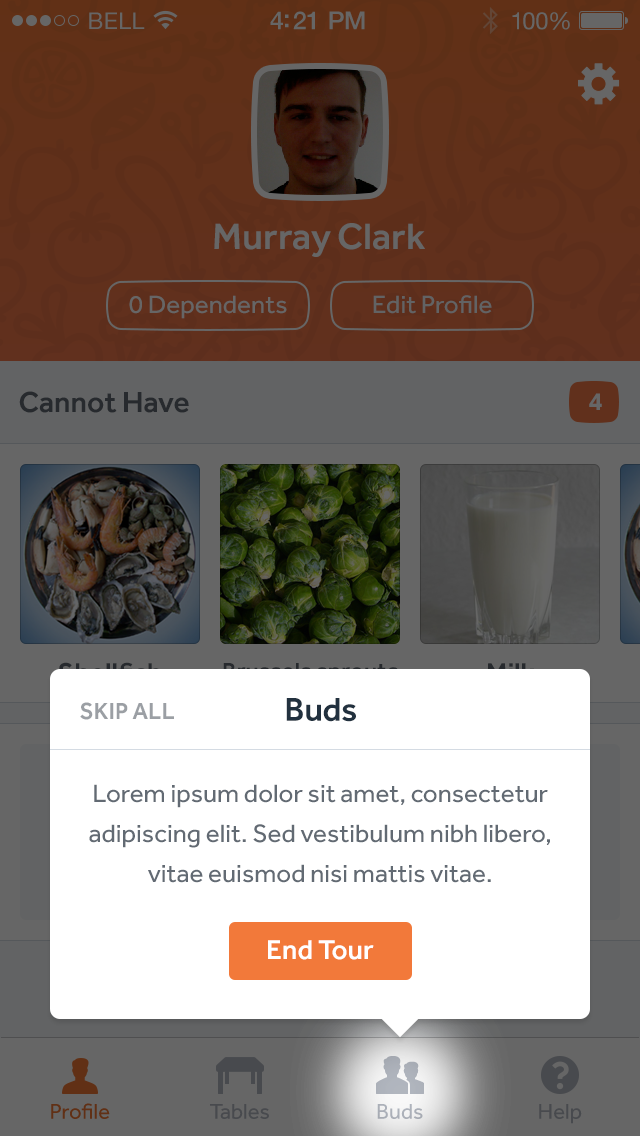
<style>
.page{position:relative;width:640px;height:1136px;background:#ffffff}
.page>*{position:absolute;margin:0}
.t1{font:23px "HelveticaNeue";letter-spacing:0.02em;color:#666666}
.t2{font:25px "HelveticaNeue-Medium";letter-spacing:-0.02em;color:#666666}
.t3{font:24px "HelveticaNeue";letter-spacing:-0.02em;color:#666666}
.t4{font:38px "Effra-Medium";color:#666666}
.t5{font:26px "Effra-Regular";color:#666666}
.t6{font:26px "Effra-Regular";color:#626364}
.t7{font:30px "Effra-Medium";color:#272a2e}
.t8{font:26px "Effra-Bold";color:#666666}
.t9{font:24px "Effra-Medium";color:#9b9fa4;text-transform:uppercase}
.t10{font:34px "Effra-Medium";letter-spacing:-0.01em;color:#22313f}
.t11{font:26px/40px "Effra-Regular";color:#626a73}
.t12{font:28px "Effra-Medium";color:#ffffff}
.t13{font:22px "Effra-Regular";color:#613015}
.t14{font:22px "Effra-Regular";color:#484a4e}
.t15{font:22px "Effra-Regular";color:#abafb8}
</style>
<div class="page">
<p class="t1" style="left:89px;top:12px;width:56px;height:17px">BELL</p>
<p class="t2" style="left:270px;top:11px;width:95px;height:19px">4:21 PM</p>
<p class="t3" style="left:512px;top:12px;width:58px;height:18px">100%</p>
<p class="t4" style="left:214px;top:223px;width:211px;height:34px">Murray Clark</p>
<p class="t5" style="left:129px;top:295px;width:158px;height:24px">0 Dependents</p>
<p class="t6" style="left:373px;top:295px;width:119px;height:19px">Edit Profile</p>
<p class="t7" style="left:19px;top:391px;width:170px;height:22px">Cannot Have</p>
<p class="t8" style="left:589px;top:393px;width:13px;height:17px">4</p>
<p class="t9" style="left:80px;top:702px;width:94px;height:18px">Skip All</p>
<p class="t10" style="left:286px;top:698px;width:70px;height:24px">Buds</p>
<p class="t11" style="left:89px;top:784px;width:461px;height:99px;text-align:center">Lorem ipsum dolor sit amet, consectetur adipiscing elit. Sed vestibulum nibh libero, vitae euismod nisi mattis vitae.</p>
<p class="t12" style="left:268px;top:940px;width:106px;height:20px">End Tour</p>
<p class="t13" style="left:51px;top:1103px;width:59px;height:16px">Profile</p>
<p class="t14" style="left:210px;top:1104px;width:59px;height:15px">Tables</p>
<p class="t15" style="left:377px;top:1104px;width:46px;height:15px">Buds</p>
<p class="t14" style="left:539px;top:1104px;width:43px;height:20px">Help</p>
</div>
